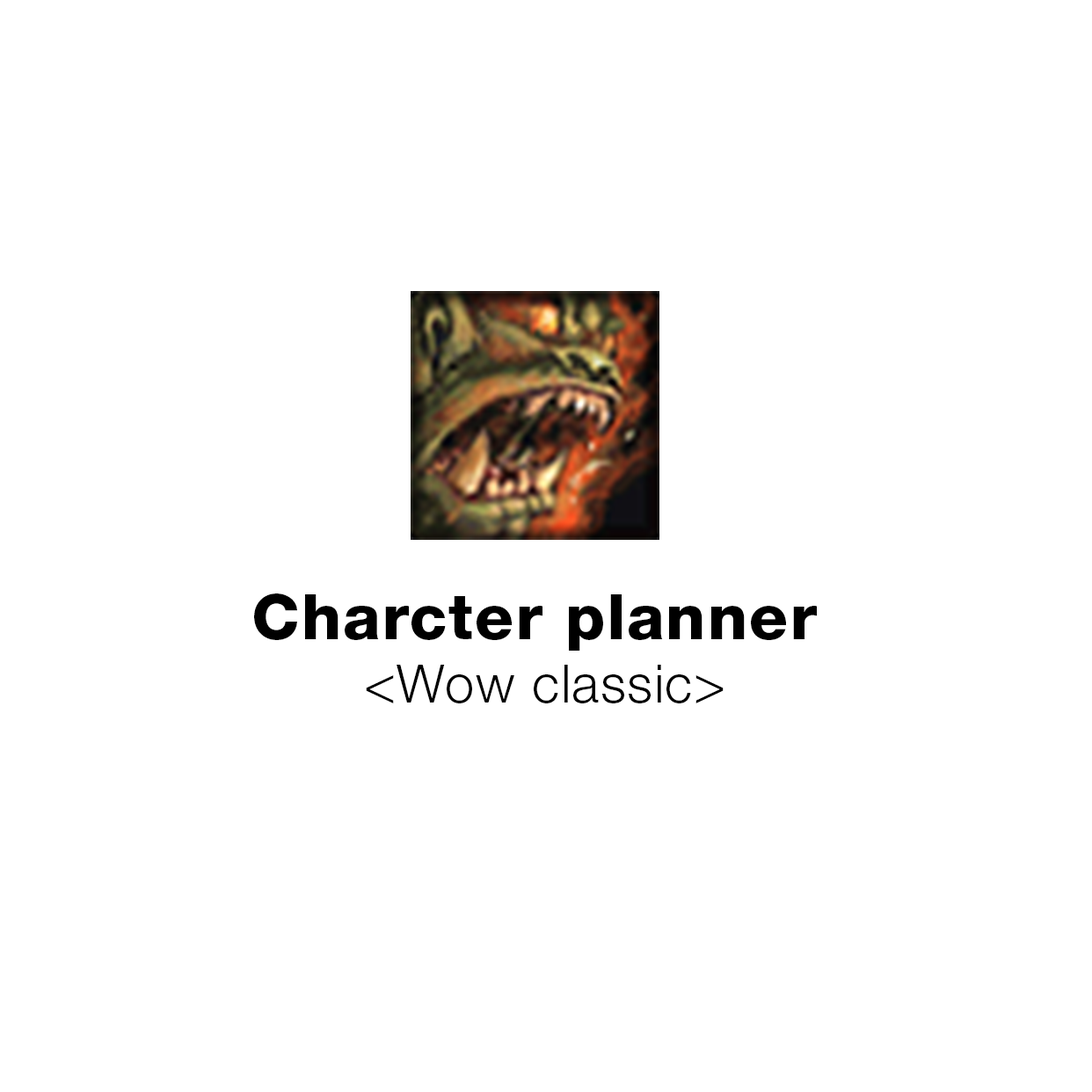
<style>
.page{position:relative;width:1092px;height:1092px;background:#ffffff}
.page>*{position:absolute;margin:0}
.t1{font:63.3px "HelveticaNeueLTPro-Hv";letter-spacing:0.025em;color:#000000}
.t2{font:52.8px "HelveticaNeueLTPro-Lt";letter-spacing:0.025em;color:#000000}
</style>
<div class="page">
<p class="t1" style="left:254px;top:593px;width:563px;height:110px;text-align:center">Charcter planner <br><span class="t2">&lt;Wow classic&gt;</span></p>
</div>
